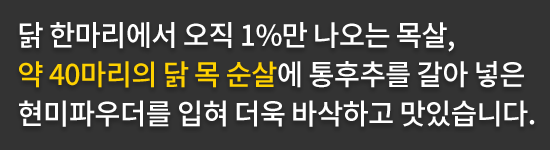
<style>
.page{position:relative;width:550px;height:150px;background:#333333}
.page>*{position:absolute;margin:0}
.t1{font:28.7px/39.2px "NotoSansKR-Medium";letter-spacing:-0.025em;color:#ffffff}
.t2{font:28.7px/39.2px "NotoSansKR-Medium";letter-spacing:-0.025em;color:#fed100}
</style>
<div class="page">
<p class="t1" style="left:19px;top:22px;width:516px;height:105px">닭 한마리에서 오직 1%만 나오는 목살, <br><span class="t2">약 40마리의 닭 목 순살</span>에 통후추를 갈아 넣은 <br>현미파우더를 입혀 더욱 바삭하고 맛있습니다.</p>
</div>
